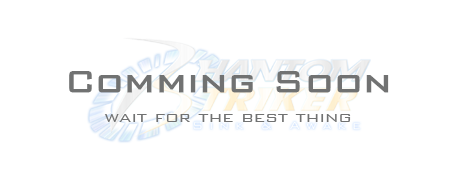
<style>
.page{position:relative;width:457px;height:187px;background:#ffffff}
.page>*{position:absolute;margin:0}
.t1{font:40.6px "BankGothicBT-Light";color:#717272;font-weight:bold}
.t2{font:19.7px "BankGothicBT-Light";color:#717272}
</style>
<div class="page">
<p class="t1" style="left:69px;top:71px;width:320px;height:22px">Comming Soon</p>
<p class="t2" style="left:104px;top:114px;width:247px;height:8px">wait for the best thing</p>
</div>
